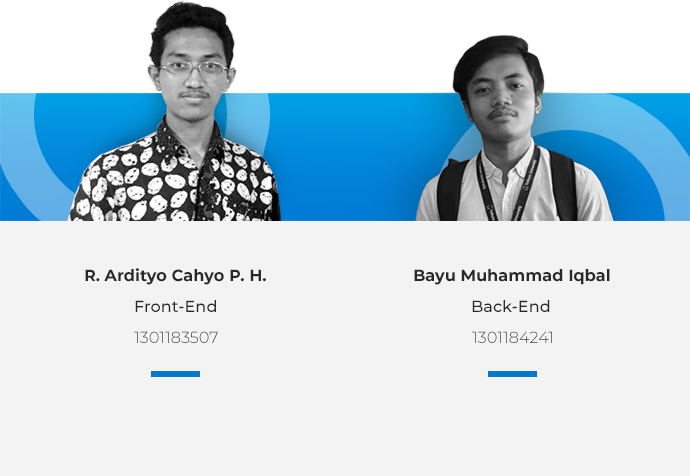
<style>
.page{position:relative;width:690px;height:476px;background:#f3f3f3}
.page>*{position:absolute;margin:0}
.t1{font:16.2px "Montserrat-Bold";color:#282828}
.t2{font:16.2px "Montserrat-Medium";color:#282828}
.t3{font:16.2px "Montserrat-Light"}
</style>
<div class="page">
<p class="t1" style="left:85px;top:268px;width:181px;height:17px">R. Ardityo Cahyo P. H.</p>
<p class="t1" style="left:414px;top:269px;width:196px;height:16px">Bayu Muhammad Iqbal</p>
<p class="t2" style="left:135px;top:300px;width:81px;height:12px">Front-End</p>
<p class="t2" style="left:472px;top:300px;width:78px;height:12px">Back-End</p>
<p class="t3" style="left:134px;top:331px;width:84px;height:12px">1301183507</p>
<p class="t3" style="left:472px;top:331px;width:80px;height:12px">1301184241</p>
</div>
